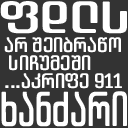
<style>
.page{position:relative;width:128px;height:128px;background:#333333}
.page>*{position:absolute;margin:0}
.t1{font:45px "ArchyEDT-Bold";color:#ffffff;scale:1.48 1}
.t2{font:21px/18px "ArchyEDT-Bold";color:#ffffff;scale:1.09 1}
.t3{font:49.1px "ArchyEDT-Bold";color:#ffffff;scale:0.81 1}
</style>
<div class="page">
<p class="t1" style="left:0px;top:1px;width:127px;height:33px">ფდლს</p>
<p class="t2" style="left:4px;top:37px;width:118px;height:52px">არ შეიბრაწო<br> სიჩუმეში<br>...აკრიფე 911</p>
<p class="t3" style="left:1px;top:91px;width:126px;height:36px">ხანძარი</p>
</div>
